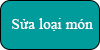
<style>
.page{position:relative;width:100px;height:50px;background:#009b9b}
.page>*{position:absolute;margin:0}
.t1{font:15.3px "TimesNewRomanPSMT";color:#fefefe}
</style>
<div class="page">
<p class="t1" style="left:12px;top:18px;width:81px;height:13px">Sửa loại món</p>
</div>
